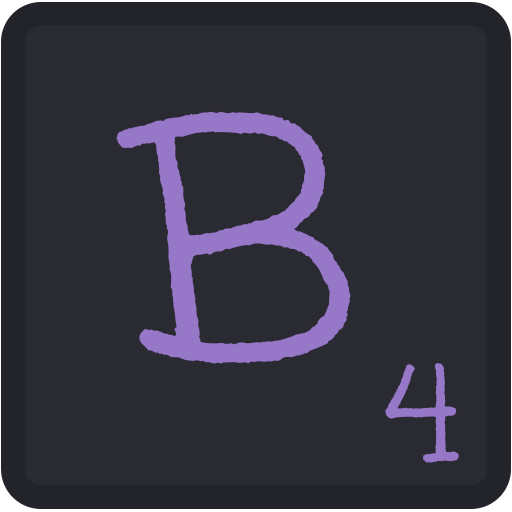
<style>
.page{position:relative;width:512px;height:512px;background:#2a2a32}
.page>*{position:absolute;margin:0}
.t1{font:350px "Unkempt";color:#9777c7}
.t2{font:150px "Unkempt";color:#9777c7}
</style>
<div class="page">
<p class="t1" style="left:116px;top:111px;width:235px;height:253px">B</p>
<p class="t2" style="left:385px;top:363px;width:74px;height:100px">4</p>
</div>
